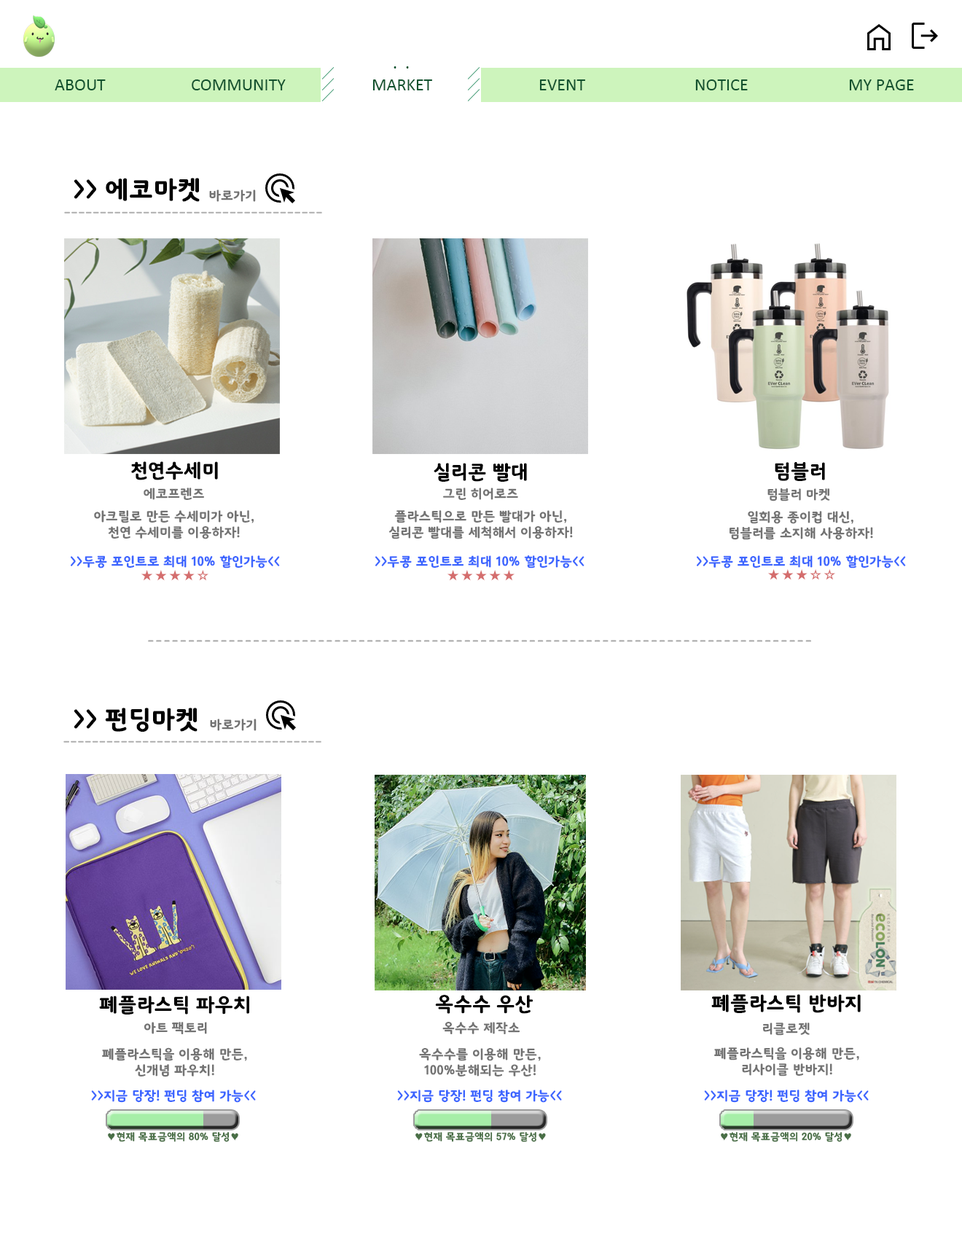
<style>
.page{position:relative;width:962px;height:1239px;background:#ffffff}
.page>*{position:absolute;margin:0}
.t1{font:17.5px "Calibri";color:#11532e}
.t2{font:17.5px "Calibri";color:#12522e}
.t3{font:25.5px "KoreanSST-R";color:#000000}
.t4{font:13.1px "KoreanSST-R";color:#737373}
.t5{font:13.1px "KoreanSST-R";color:#acacac}
.t6{font:19.7px "KoreanSST-R";color:#000000}
.t7{font:13.1px "KoreanSST-R";color:#3c65ff}
.t8{font:14.6px "KoreanSST-R";color:#d46d6d}
.t9{font:10.2px "KoreanSST-R";color:#496f46}
</style>
<div class="page">
<p class="t1" style="left:55px;top:79px;width:51px;height:11px">ABOUT</p>
<p class="t2" style="left:192px;top:79px;width:94px;height:11px">COMMUNITY</p>
<p class="t2" style="left:373px;top:79px;width:59px;height:11px">MARKET</p>
<p class="t2" style="left:539px;top:79px;width:46px;height:11px">EVENT</p>
<p class="t2" style="left:695px;top:79px;width:53px;height:11px">NOTICE</p>
<p class="t2" style="left:849px;top:79px;width:65px;height:11px">MY PAGE</p>
<p class="t3" style="left:74px;top:178px;width:126px;height:24px">&gt;&gt; 에코마켓</p>
<p class="t4" style="left:209px;top:190px;width:47px;height:12px">바로가기</p>
<p class="t5" style="left:64px;top:211px;width:258px;height:3px">____________________________________</p>
<p class="t6" style="left:131px;top:461px;width:87px;height:19px">천연수세미</p>
<p class="t6" style="left:434px;top:463px;width:93px;height:19px">실리콘 빨대</p>
<p class="t6" style="left:775px;top:462px;width:50px;height:19px">텀블러</p>
<p class="t4" style="left:144px;top:488px;width:60px;height:12px">에코프렌즈</p>
<p class="t4" style="left:443px;top:488px;width:75px;height:12px">그린 히어로즈</p>
<p class="t4" style="left:768px;top:488px;width:62px;height:14px">텀블러 마켓</p>
<p class="t4" style="left:94px;top:510px;width:160px;height:29px;text-align:center">아크릴로 만든 수세미가 아닌,<br>천연 수세미를 이용하자!</p>
<p class="t4" style="left:389px;top:510px;width:184px;height:29px;text-align:center">플라스틱으로 만든 빨대가 아닌,<br>실리콘 빨대를 세척해서 이용하자!</p>
<p class="t4" style="left:730px;top:511px;width:143px;height:29px;text-align:center">일회용 종이컵 대신,<br>텀블러를 소지해 사용하자!</p>
<p class="t7" style="left:71px;top:555px;width:209px;height:14px">&gt;&gt;두콩 포인트로 최대 10% 할인가능&lt;&lt;</p>
<p class="t7" style="left:375px;top:555px;width:210px;height:14px">&gt;&gt;두콩 포인트로 최대 10% 할인가능&lt;&lt;</p>
<p class="t7" style="left:697px;top:555px;width:209px;height:14px">&gt;&gt;두콩 포인트로 최대 10% 할인가능&lt;&lt;</p>
<p class="t8" style="left:768px;top:569px;width:67px;height:11px">★★★☆☆</p>
<p class="t8" style="left:141px;top:570px;width:67px;height:11px">★★★★☆</p>
<p class="t8" style="left:448px;top:570px;width:67px;height:11px">★★★★★</p>
<p class="t5" style="left:148px;top:640px;width:663px;height:2px">----------------------------------------------------------------------------------</p>
<p class="t3" style="left:74px;top:708px;width:124px;height:24px">&gt;&gt; 펀딩마켓</p>
<p class="t4" style="left:210px;top:719px;width:47px;height:12px">바로가기</p>
<p class="t5" style="left:63px;top:741px;width:258px;height:2px">____________________________________</p>
<p class="t6" style="left:99px;top:996px;width:150px;height:19px">폐플라스틱 파우치</p>
<p class="t6" style="left:435px;top:995px;width:98px;height:19px">옥수수 우산</p>
<p class="t6" style="left:711px;top:994px;width:150px;height:19px">폐플라스틱 반바지</p>
<p class="t4" style="left:144px;top:1022px;width:63px;height:12px">아트 팩토리</p>
<p class="t4" style="left:442px;top:1022px;width:78px;height:12px">옥수수 제작소</p>
<p class="t4" style="left:763px;top:1023px;width:47px;height:13px">리클로젯</p>
<p class="t4" style="left:102px;top:1048px;width:145px;height:29px;text-align:center">폐플라스틱을 이용해 만든,<br>신개념 파우치!</p>
<p class="t4" style="left:419px;top:1048px;width:122px;height:29px;text-align:center">옥수수를 이용해 만든,<br>100%분해되는 우산!</p>
<p class="t4" style="left:714px;top:1047px;width:145px;height:30px;text-align:center">폐플라스틱을 이용해 만든,<br>리사이클 반바지!</p>
<p class="t7" style="left:91px;top:1090px;width:165px;height:13px">&gt;&gt;지금 당장! 펀딩 참여 가능&lt;&lt;</p>
<p class="t7" style="left:397px;top:1090px;width:165px;height:13px">&gt;&gt;지금 당장! 펀딩 참여 가능&lt;&lt;</p>
<p class="t7" style="left:704px;top:1090px;width:165px;height:13px">&gt;&gt;지금 당장! 펀딩 참여 가능&lt;&lt;</p>
<p class="t9" style="left:108px;top:1132px;width:130px;height:10px">♥현재 목표금액의 80% 달성♥</p>
<p class="t9" style="left:416px;top:1132px;width:130px;height:10px">♥현재 목표금액의 57% 달성♥</p>
<p class="t9" style="left:721px;top:1132px;width:130px;height:10px">♥현재 목표금액의 20% 달성♥</p>
</div>
